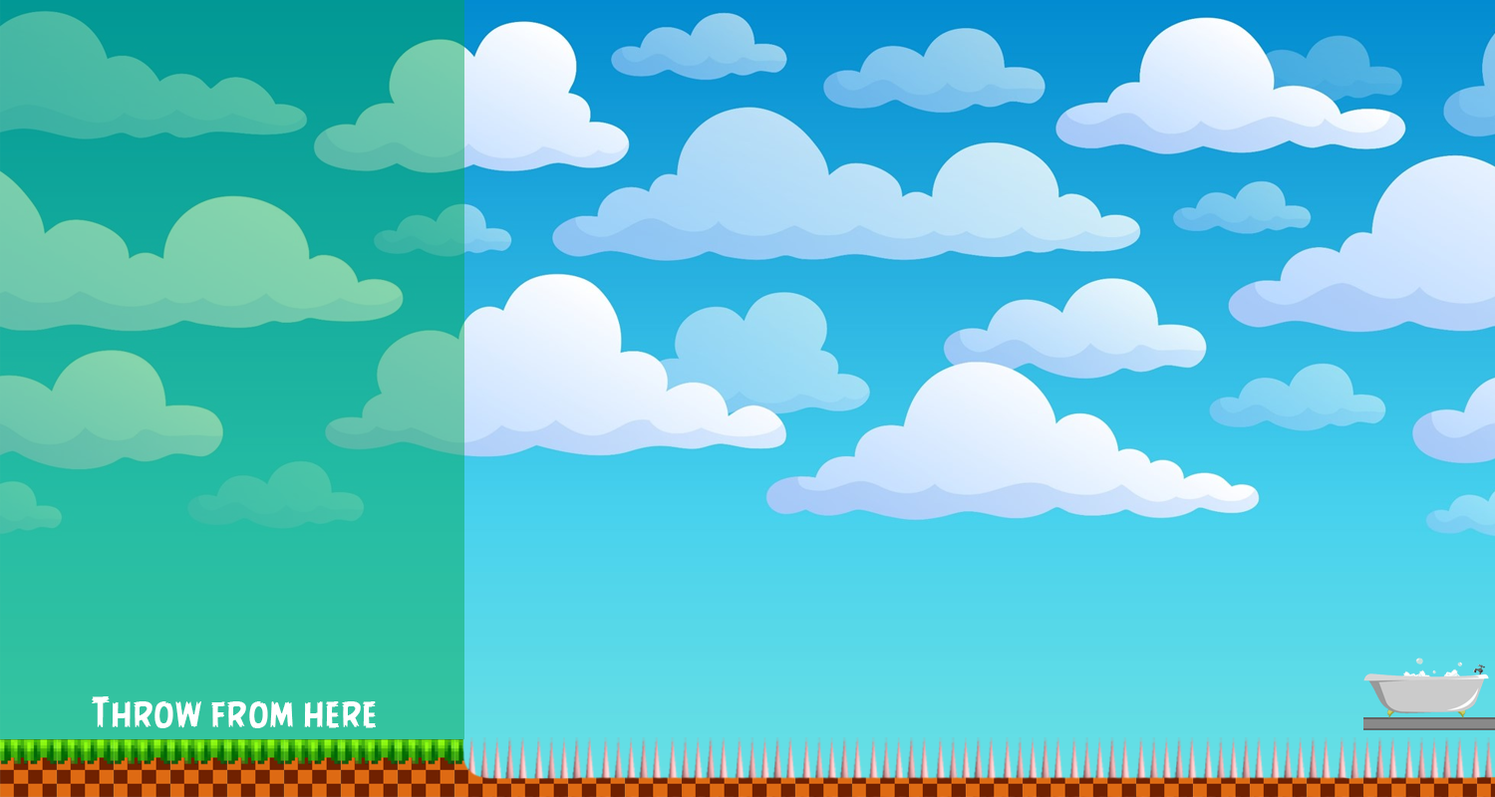
<style>
.page{position:relative;width:1495px;height:797px}
.page>*{position:absolute;margin:0}
.t1{font:39.9px "AngryBirds-Regular";letter-spacing:0.02em;color:#ffffff}
</style>
<div class="page">
<p class="t1" style="left:92px;top:697px;width:284px;height:32px">Throw from here</p>
</div>
